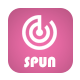
<style>
.page{position:relative;width:80px;height:80px;background:#ffffff}
.page>*{position:absolute;margin:0}
.t1{font:15px "Bauhaus93";color:#ffffff}
</style>
<div class="page">
<p class="t1" style="left:24px;top:56px;width:32px;height:12px">SPUN</p>
</div>
